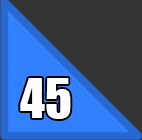
<style>
.page{position:relative;width:142px;height:140px;background:#333333}
.page>*{position:absolute;margin:0}
.t1{font:50px "Impact";color:#ffffff}
</style>
<div class="page">
<p class="t1" style="left:20px;top:78px;width:51px;height:41px">45</p>
</div>
